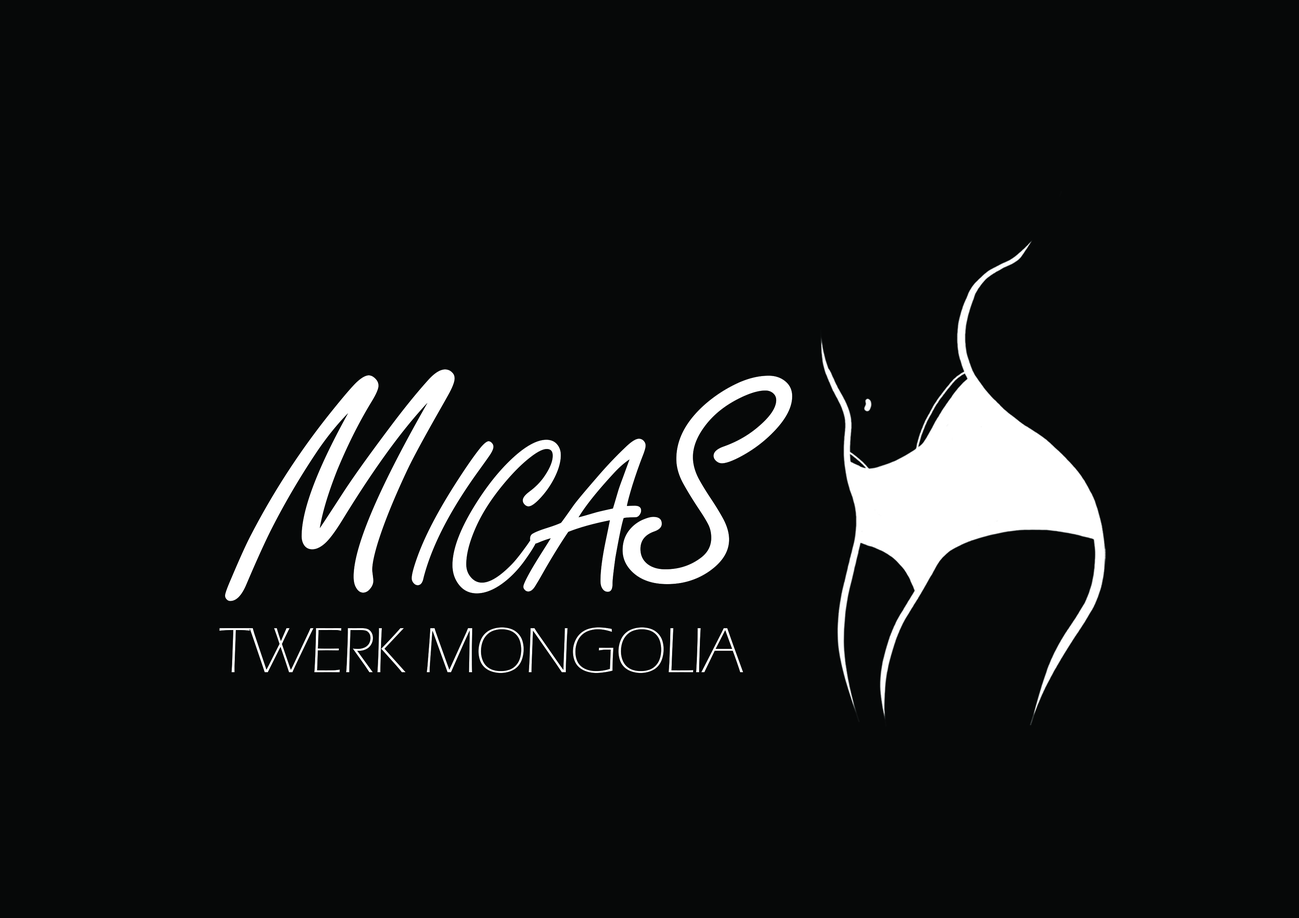
<style>
.page{position:relative;width:1299px;height:918px;background:#060808}
.page>*{position:absolute;margin:0}
.t1{font:320.5px "FreestyleScript-Regular";letter-spacing:-0.04em;color:#ffffff;font-variant:small-caps}
.t2{font:94.7px "ErasITC-Light";letter-spacing:-0.04em;color:#ffffff;font-variant:small-caps}
</style>
<div class="page">
<p class="t1" style="left:225px;top:369px;width:567px;height:232px">MicaS</p>
<p class="t2" style="left:219px;top:628px;width:524px;height:45px">twerk mongolia</p>
</div>
